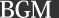
<style>
.page{position:relative;width:59px;height:18px;background:#333333}
.page>*{position:absolute;margin:0}
.t1{font:24px "HeiseiMinStd-W7";color:#ffffff}
</style>
<div class="page">
<p class="t1" style="left:0px;top:0px;width:52px;height:18px">BGM</p>
</div>
